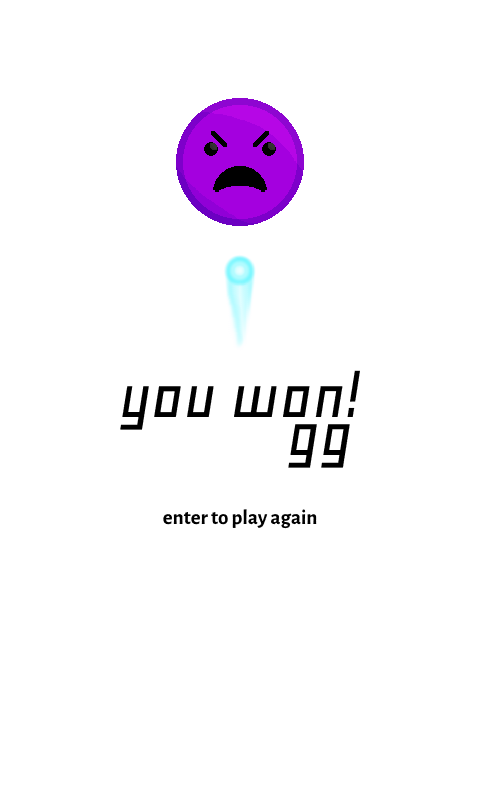
<style>
.page{position:relative;width:480px;height:800px;background:#ffffff}
.page>*{position:absolute;margin:0}
.t1{font:70px "GeoOblique";color:#000000}
.t2{font:30px "Gurajada";color:#000000}
</style>
<div class="page">
<p class="t1" style="left:120px;top:370px;width:240px;height:60px">you won!</p>
<p class="t1" style="left:288px;top:424px;width:62px;height:44px">gg</p>
<p class="t2" style="left:163px;top:509px;width:154px;height:20px">enter to play again</p>
</div>
